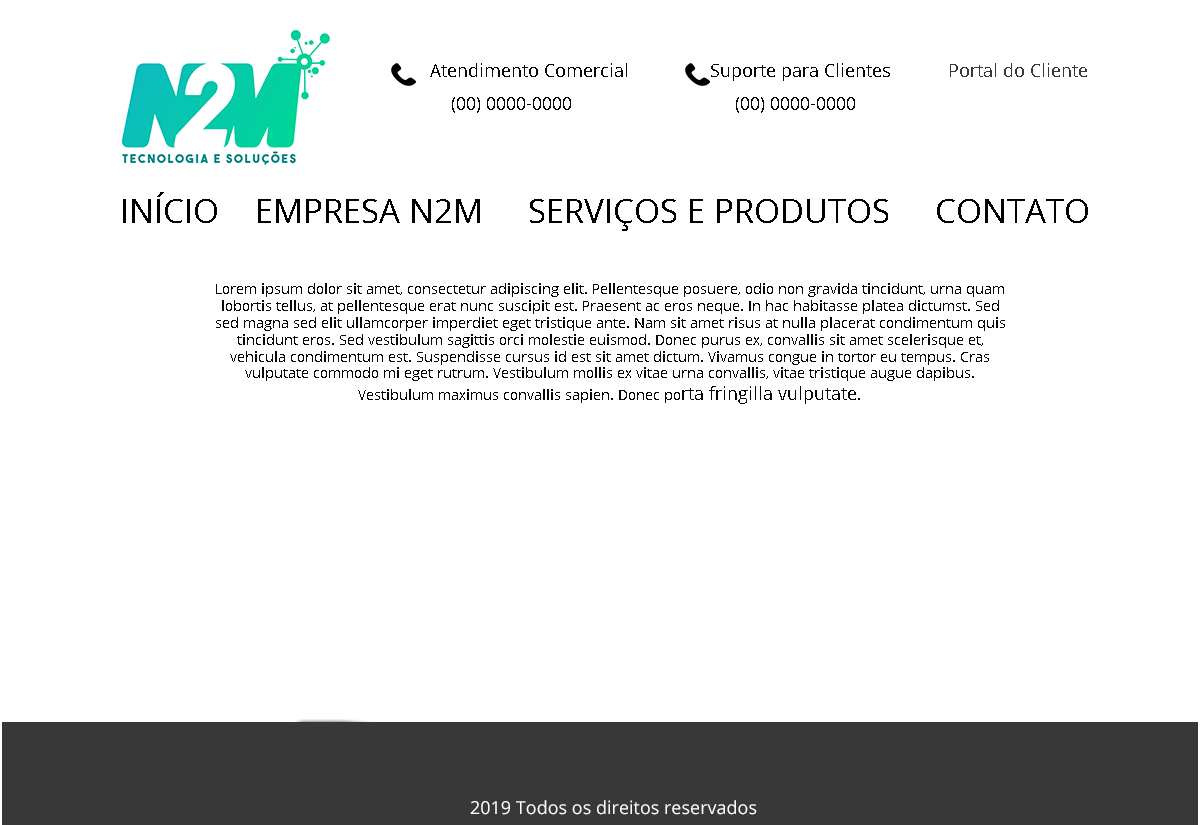
<style>
.page{position:relative;width:1200px;height:825px;background:#ffffff}
.page>*{position:absolute;margin:0}
.t1{font:18px "OpenSans";color:#0a0909}
.t2{font:18px "OpenSans";color:#373737}
.t3{font:33px "OpenSans";color:#000000}
.t4{font:14px "OpenSans";color:#0a0909}
.t5{font:18px "OpenSans";color:#fdfbfb}
</style>
<div class="page">
<p class="t1" style="left:430px;top:63px;width:197px;height:14px">Atendimento Comercial</p>
<p class="t1" style="left:711px;top:63px;width:179px;height:18px">Suporte para Clientes</p>
<p class="t2" style="left:950px;top:63px;width:137px;height:14px">Portal do Cliente</p>
<p class="t1" style="left:452px;top:97px;width:119px;height:16px">(00) 0000-0000</p>
<p class="t1" style="left:736px;top:97px;width:119px;height:16px">(00) 0000-0000</p>
<p class="t3" style="left:123px;top:192px;width:965px;height:39px">INÍCIO    EMPRESA N2M     SERVIÇOS E PRODUTOS     CONTATO</p>
<p class="t4" style="left:216px;top:283px;width:789px;height:121px;text-align:center">Lorem ipsum dolor sit amet, consectetur adipiscing elit. Pellentesque posuere, odio non gravida tincidunt, urna quam lobortis tellus, at pellentesque erat nunc suscipit est. Praesent ac eros neque. In hac habitasse platea dictumst. Sed sed magna sed elit ullamcorper imperdiet eget tristique ante. Nam sit amet risus at nulla placerat condimentum quis tincidunt eros. Sed vestibulum sagittis orci molestie euismod. Donec purus ex, convallis sit amet scelerisque et, vehicula condimentum est. Suspendisse cursus id est sit amet dictum. Vivamus congue in tortor eu tempus. Cras vulputate commodo mi eget rutrum. Vestibulum mollis ex vitae urna convallis, vitae tristique augue dapibus. Vestibulum maximus convallis sapien. Donec po<span class="t1">rta fringilla vulputate.</span></p>
<p class="t5" style="left:470px;top:800px;width:287px;height:15px">2019 Todos os direitos reservados</p>
</div>
